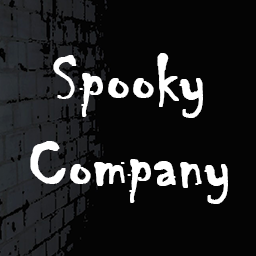
<style>
.page{position:relative;width:256px;height:256px;background:#040404}
.page>*{position:absolute;margin:0}
.t1{font:72px "Chiller-Regular";color:#ffffff;font-weight:bold}
</style>
<div class="page">
<p class="t1" style="left:30px;top:53px;width:198px;height:151px;text-align:center">Spooky<br>Company</p>
</div>
